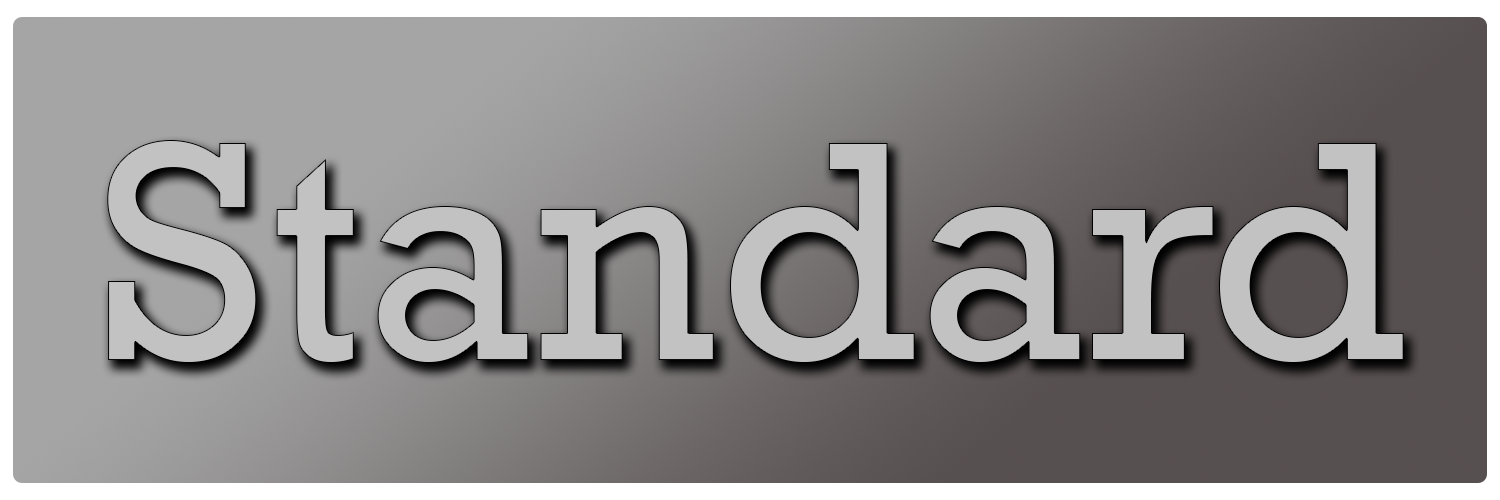
<style>
.page{position:relative;width:1500px;height:500px}
.page>*{position:absolute;margin:0}
.t1{font:319.4px "Rockwell";color:#c2c2c2}
</style>
<div class="page">
<p class="t1" style="left:107px;top:140px;width:1297px;height:223px">Standard</p>
</div>
